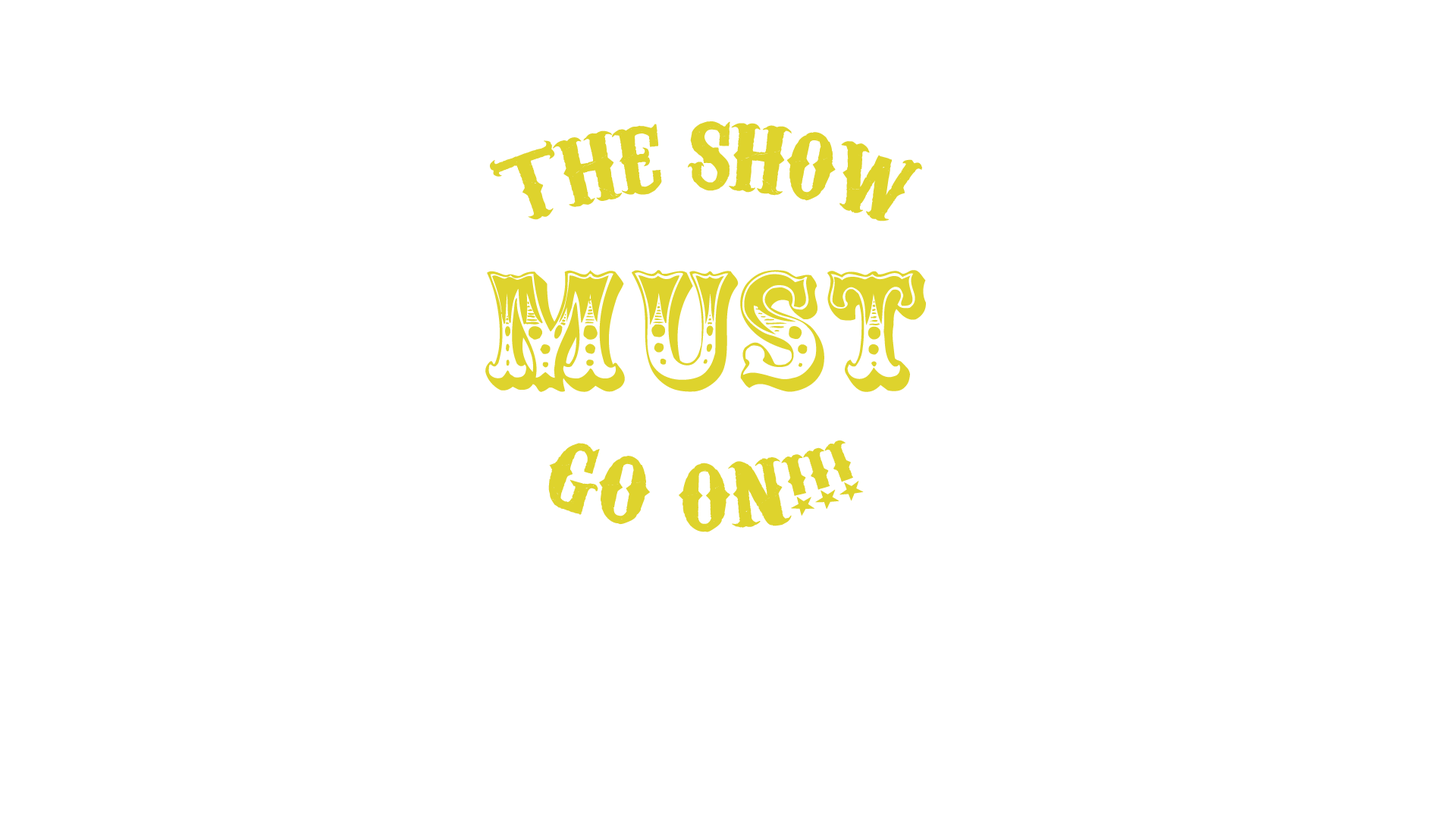
<style>
.page{position:relative;width:1456px;height:819px;background:#ffffff}
.page>*{position:absolute;margin:0}
.t1{font:91px "CarnivaleeFreakshow";color:#ded32d}
.t2{font:151.7px "Circus";color:#ded32d}
</style>
<div class="page">
<p class="t1" style="left:490px;top:121px;width:432px;height:100px">THE SHOW</p>
<p class="t2" style="left:485px;top:270px;width:441px;height:122px">MUST</p>
<p class="t1" style="left:548px;top:440px;width:316px;height:92px">GO ON!!!</p>
</div>
